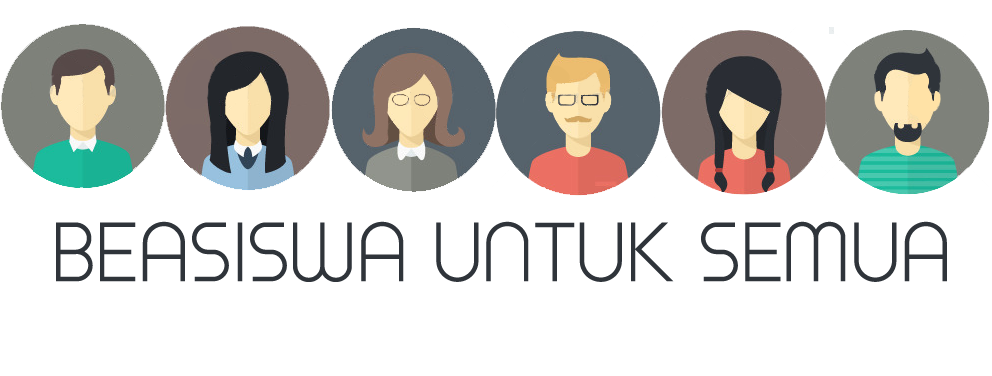
<style>
.page{position:relative;width:992px;height:376px;background:#ffffff}
.page>*{position:absolute;margin:0}
.t1{font:80px "TimeBurner";color:#2f343a}
</style>
<div class="page">
<p class="t1" style="left:56px;top:221px;width:891px;height:61px">BEASISWA UNTUK SEMUA</p>
</div>
